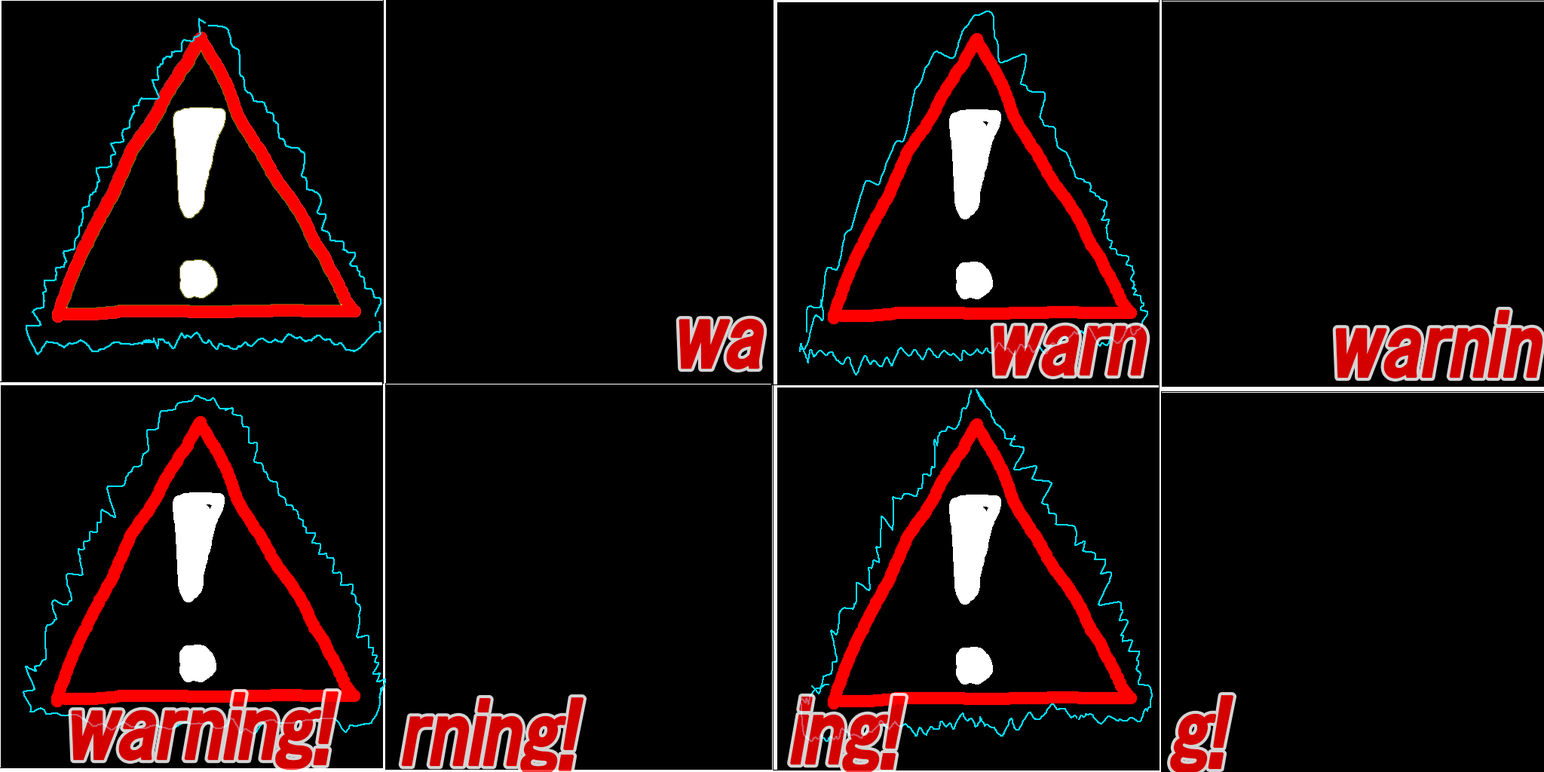
<style>
.page{position:relative;width:1544px;height:772px;background:#000000}
.page>*{position:absolute;margin:0}
.t1{font:82.3px "HGPGothicE";letter-spacing:-0.07em;color:#d40000;font-weight:bold;font-style:italic}
</style>
<div class="page">
<p class="t1" style="left:1335px;top:309px;width:209px;height:70px">warnin</p>
<p class="t1" style="left:679px;top:318px;width:86px;height:52px">wa</p>
<p class="t1" style="left:993px;top:325px;width:155px;height:52px">warn</p>
<p class="t1" style="left:71px;top:691px;width:268px;height:80px">warning!</p>
</div>
